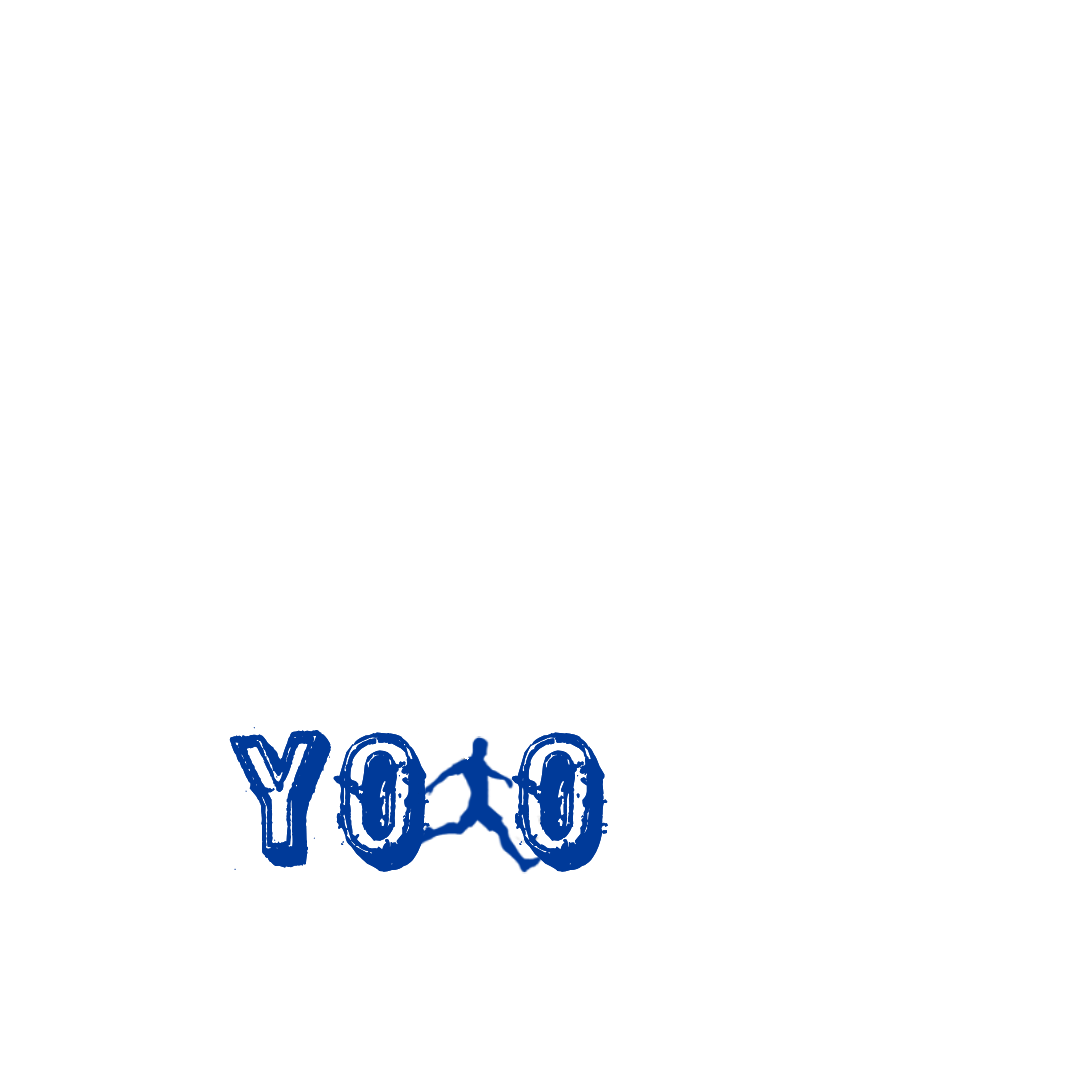
<style>
.page{position:relative;width:1080px;height:1080px;background:#ffffff}
.page>*{position:absolute;margin:0}
.t1{font:165.6px "District";color:#003a99}
</style>
<div class="page">
<p class="t1" style="left:229px;top:727px;width:379px;height:145px">YO  O</p>
</div>
